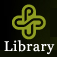
<style>
.page{position:relative;width:57px;height:57px}
.page>*{position:absolute;margin:0}
.t1{font:14px "Georgia";letter-spacing:0.05em;color:#ffffff}
</style>
<div class="page">
<p class="t1" style="left:4px;top:40px;width:51px;height:15px">Library</p>
</div>
